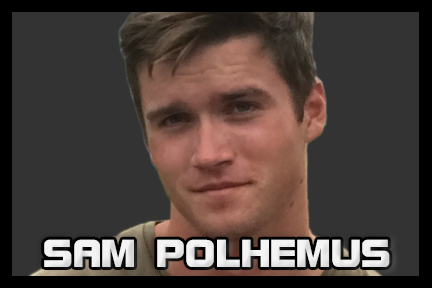
<style>
.page{position:relative;width:432px;height:288px;background:#333333}
.page>*{position:absolute;margin:0}
.t1{font:41.7px "BolsterBold";color:#f3f3f3}
</style>
<div class="page">
<p class="t1" style="left:44px;top:239px;width:346px;height:28px">SAM POLHEMUS</p>
</div>
